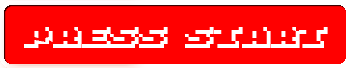
<style>
.page{position:relative;width:350px;height:68px;background:#ff0000}
.page>*{position:absolute;margin:0}
.t1{font:57.1px "8-bit-Arcade-Out";color:#ffffff}
</style>
<div class="page">
<p class="t1" style="left:24px;top:27px;width:304px;height:21px">press start</p>
</div>
